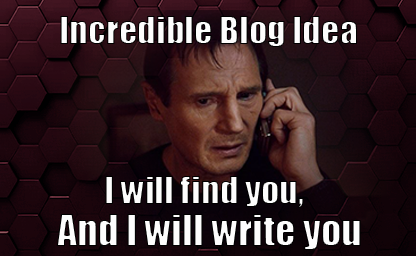
<style>
.page{position:relative;width:416px;height:256px}
.page>*{position:absolute;margin:0}
.t1{font:36px "Impact";color:#ffffff}
.t2{font:40px "Impact";color:#ffffff}
</style>
<div class="page">
<p class="t1" style="left:60px;top:16px;width:297px;height:31px">Incredible Blog Idea</p>
<p class="t1" style="left:105px;top:176px;width:199px;height:32px">I will find you,</p>
<p class="t2" style="left:56px;top:214px;width:305px;height:36px">And I will write you</p>
</div>
